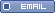
<style>
.page{position:relative;width:55px;height:13px;background:#7e95bd}
.page>*{position:absolute;margin:0}
.t1{font:8px "BitDustTwo";color:#ffffff}
</style>
<div class="page">
<p class="t1" style="left:21px;top:4px;width:25px;height:5px">EMAIL</p>
</div>
